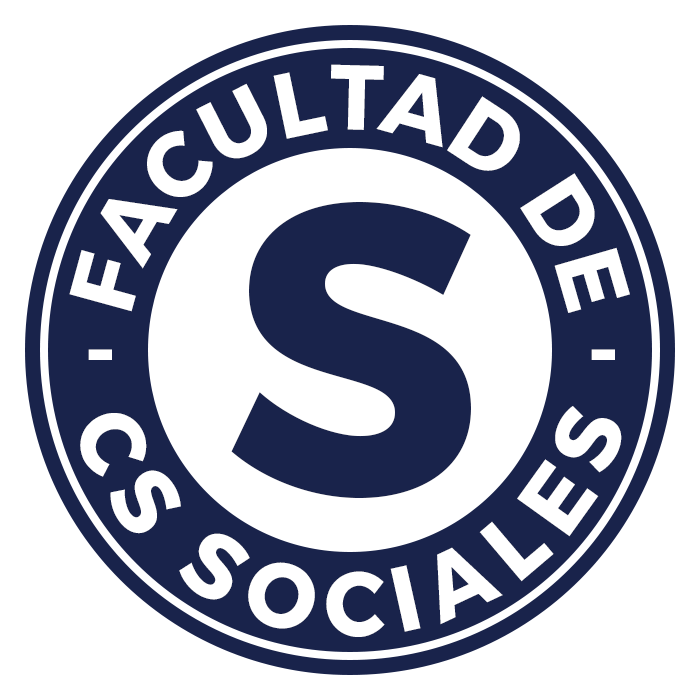
<style>
.page{position:relative;width:700px;height:700px;background:#ffffff}
.page>*{position:absolute;margin:0}
.t1{font:91.9px "Montserrat-Bold";color:#ffffff;scale:0.95 1}
.t2{font:415.6px "Montserrat-Bold";color:#19234b;scale:0.95 1}
</style>
<div class="page">
<p class="t1" style="left:69px;top:64px;width:561px;height:249px;text-align:center">FACULTAD DE</p>
<p class="t2" style="left:231px;top:202px;width:240px;height:297px">S</p>
<p class="t1" style="left:88px;top:349px;width:24px;height:11px">-</p>
<p class="t1" style="left:591px;top:349px;width:24px;height:11px">-</p>
<p class="t1" style="left:80px;top:406px;width:542px;height:231px;text-align:center">CS SOCIALES</p>
</div>
